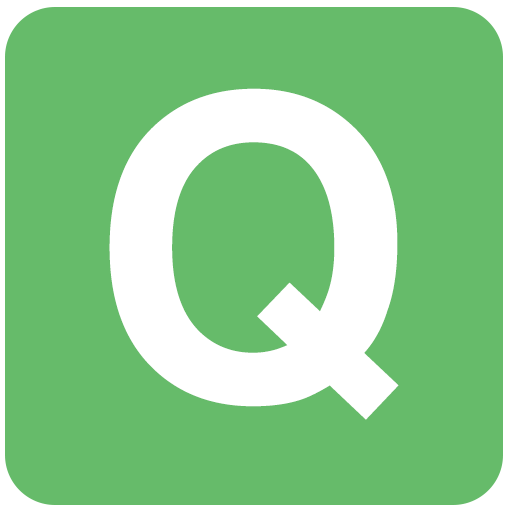
<style>
.page{position:relative;width:512px;height:512px;background:#66bb6a}
.page>*{position:absolute;margin:0}
.t1{font:416.7px "Helvetica-Bold";letter-spacing:-0.04em;color:#ffffff}
</style>
<div class="page">
<p class="t1" style="left:109px;top:88px;width:290px;height:332px">Q</p>
</div>
